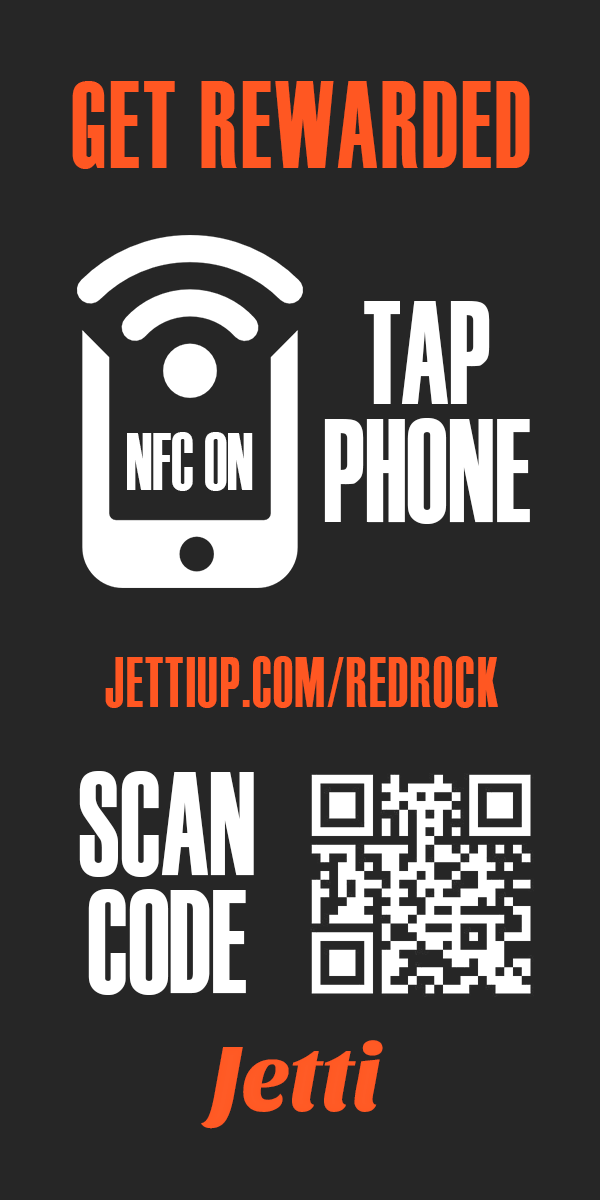
<style>
.page{position:relative;width:600px;height:1200px;background:#262626}
.page>*{position:absolute;margin:0}
.t1{font:123.8px "Haettenschweiler";letter-spacing:0.04em;color:#ff5722;text-transform:uppercase;scale:0.75 1}
.t2{font:147.2px/117.9px "Haettenschweiler";color:#ffffff;scale:0.74 1}
.t3{font:82.5px "Haettenschweiler";color:#ffffff;scale:0.74 1}
.t4{font:70.8px "Haettenschweiler";letter-spacing:0.04em;color:#ff5722;text-transform:uppercase;scale:0.74 1}
.t5{font:95.6px "SansitaOne";letter-spacing:-0.01em;color:#ff5722;scale:0.95 1}
</style>
<div class="page">
<p class="t1" style="left:72px;top:81px;width:458px;height:88px">Get rewarded</p>
<p class="t2" style="left:324px;top:301px;width:206px;height:223px;text-align:center">TAP<br>PHONE</p>
<p class="t3" style="left:127px;top:432px;width:126px;height:59px">NFC ON</p>
<p class="t4" style="left:105px;top:656px;width:393px;height:52px">jettiup.com/redrock</p>
<p class="t2" style="left:79px;top:771px;width:175px;height:224px;text-align:center">SCAN<br>CODE</p>
<p class="t5" style="left:201px;top:1040px;width:182px;height:89px">Jetti</p>
</div>
